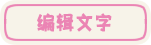
<style>
.page{position:relative;width:151px;height:45px;background:#f7f3e9}
.page>*{position:absolute;margin:0}
.t1{font:12px "shetumodengxiaofangti";color:#eb84b4;font-weight:bold;scale:0.94 1}
</style>
<div class="page">
<p class="t1" style="left:37px;top:13px;width:75px;height:19px">编辑文字</p>
</div>
